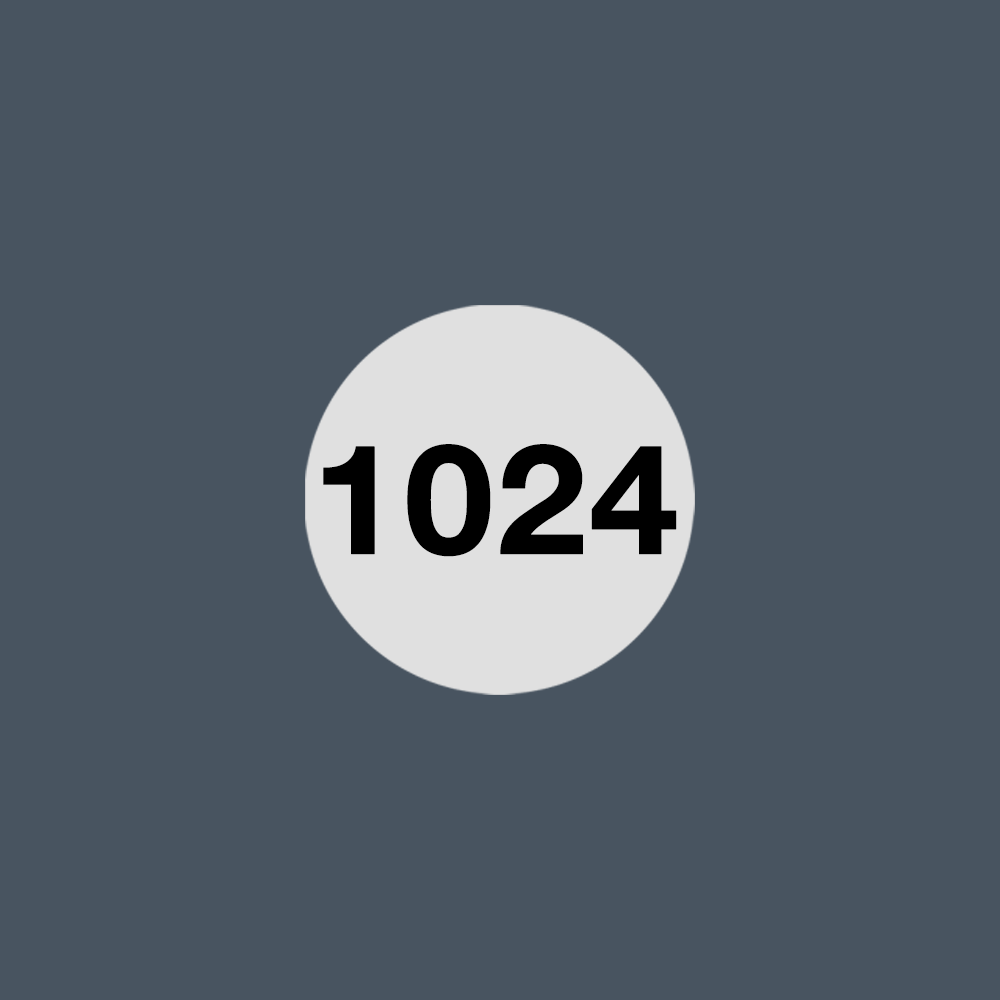
<style>
.page{position:relative;width:1000px;height:1000px;background:#485460}
.page>*{position:absolute;margin:0}
.t1{font:153px "HelveticaNeue-Bold";color:#000000;font-weight:bold;scale:1.04 1}
</style>
<div class="page">
<p class="t1" style="left:323px;top:444px;width:354px;height:113px">1024</p>
</div>
